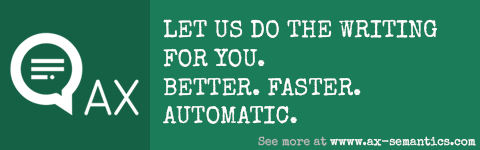
<style>
.page{position:relative;width:480px;height:150px;background:#1b7c5a}
.page>*{position:absolute;margin:0}
.t1{font:24px "SpecialElite-Regular";color:#ffffff}
.t2{font:12px "SpecialElite-Regular";color:#ffffff}
.t3{font:12px "SpecialElite-Regular";color:#bbbbbb}
</style>
<div class="page">
<p class="t1" style="left:163px;top:19px;width:274px;height:105px">LET US DO THE WRITING<br>FOR YOU.<br>BETTER. FASTER.<br>AUTOMATIC.</p>
<p class="t2" style="left:258px;top:136px;width:218px;height:10px"><span class="t3">See more at</span> wwww.ax-semantics.com</p>
</div>
